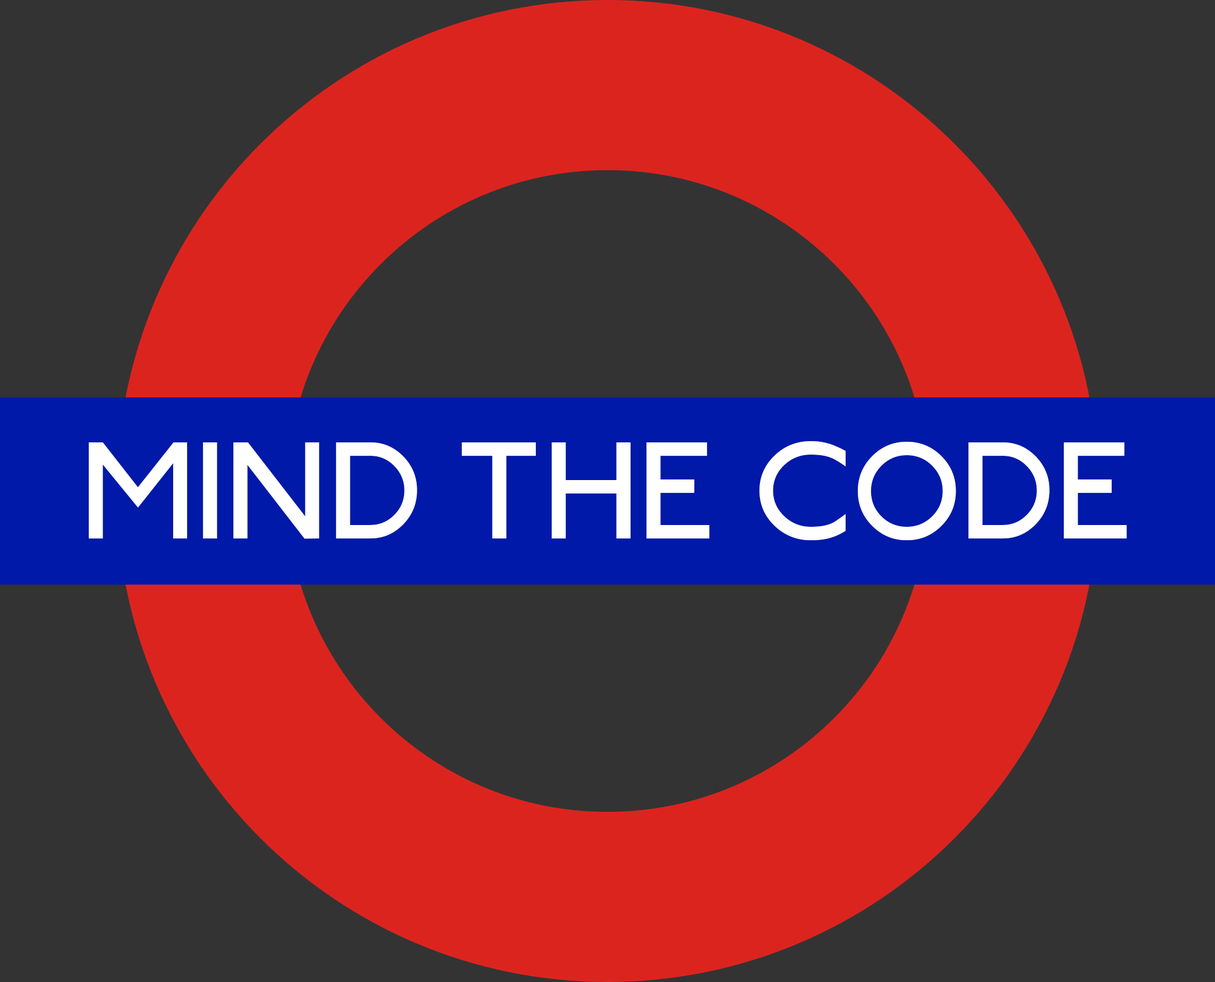
<style>
.page{position:relative;width:1215px;height:982px;background:#333333}
.page>*{position:absolute;margin:0}
.t1{font:133.6px "London-Tube";letter-spacing:-0.005em;color:#ffffff}
</style>
<div class="page">
<p class="t1" style="left:89px;top:441px;width:1038px;height:99px">MIND THE CODE</p>
</div>
